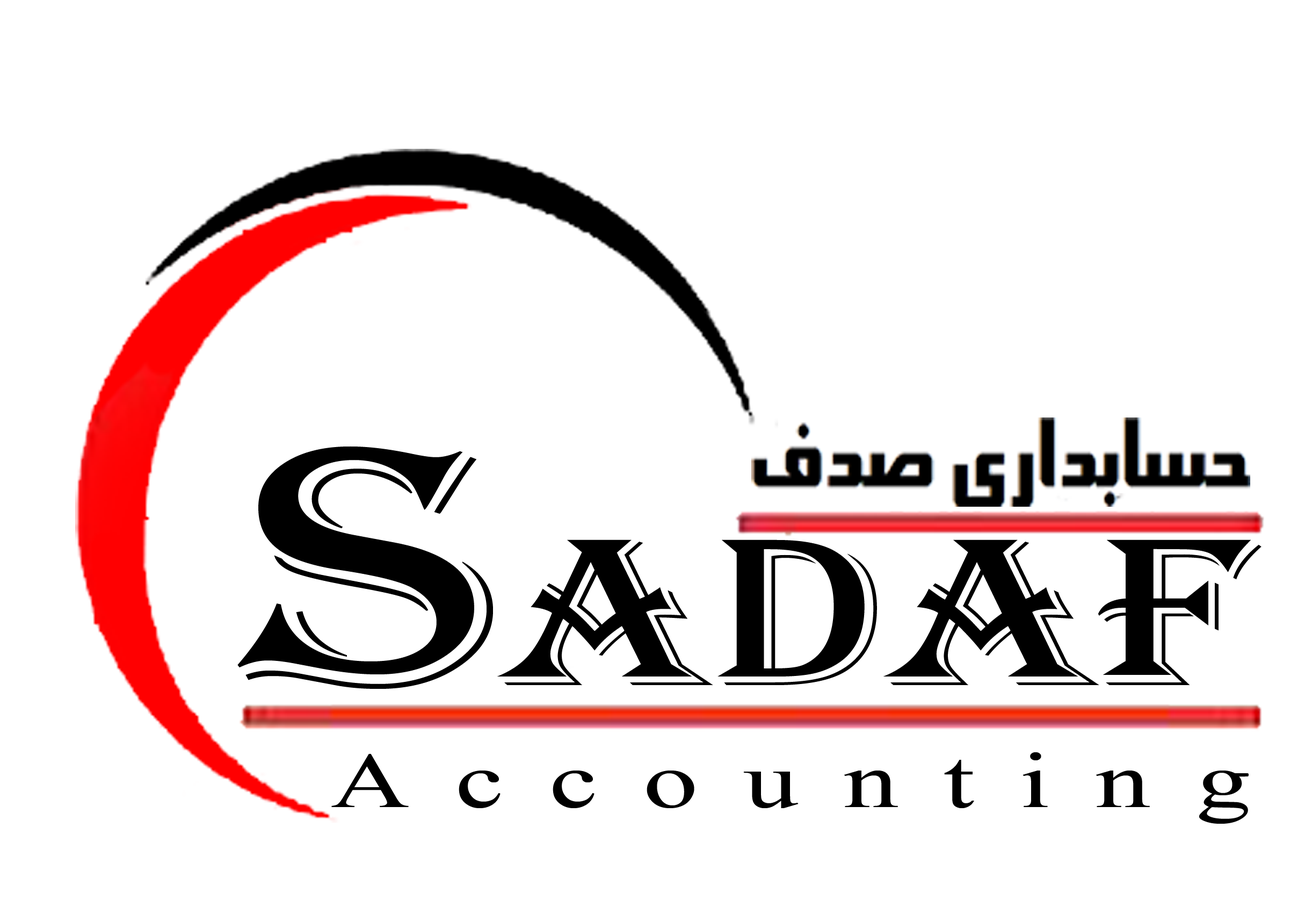
<style>
.page{position:relative;width:1305px;height:914px;background:#ffffff}
.page>*{position:absolute;margin:0}
.t1{font:217.4px "Algerian";color:#000000;scale:1.31 1}
.t2{font:352.4px "Algerian";color:#000000;scale:1.31 1}
.t3{font:78.3px "TimesNewRomanPSMT";letter-spacing:0.42em;color:#000000;scale:1.39 1}
</style>
<div class="page">
<p class="t1" style="left:237px;top:446px;width:1025px;height:243px"><span class="t2">S</span>adaf</p>
<p class="t3" style="left:331px;top:752px;width:918px;height:71px">Accounting</p>
</div>
